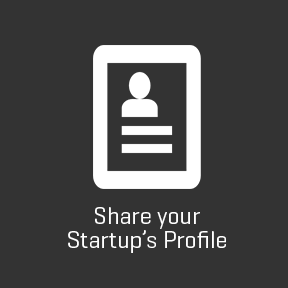
<style>
.page{position:relative;width:288px;height:288px;background:#333333}
.page>*{position:absolute;margin:0}
.t1{font:24px/24px "Geogrotesque-Regular";color:#ffffff}
</style>
<div class="page">
<p class="t1" style="left:68px;top:207px;width:158px;height:46px;text-align:center">Share your Startup’s Profile</p>
</div>
